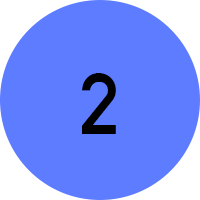
<style>
.page{position:relative;width:200px;height:200px;background:#5d7cff}
.page>*{position:absolute;margin:0}
.t1{font:85px "DINAlternate-Bold";color:#000000}
</style>
<div class="page">
<p class="t1" style="left:82px;top:73px;width:34px;height:61px">2</p>
</div>
